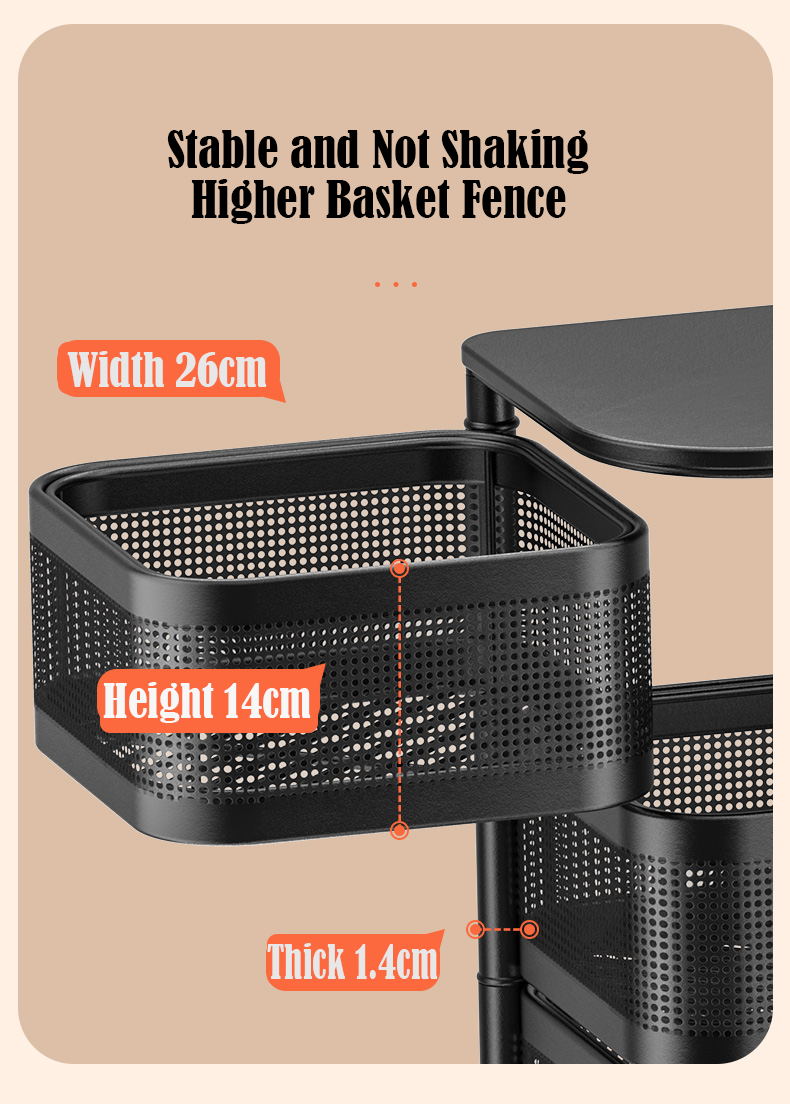
<style>
.page{position:relative;width:790px;height:1104px;background:#ddbfa7}
.page>*{position:absolute;margin:0}
.t1{font:48px "BernardMT-Condensed";color:#000000}
.t2{font:44px "BernardMT-Condensed";color:#e7e7e7}
.t3{font:44px "BernardMT-Condensed";color:#f7f7f7}
.t4{font:44px "BernardMT-Condensed";color:#e7e7e7;scale:0.85 1}
</style>
<div class="page">
<p class="t1" style="left:167px;top:129px;width:422px;height:45px">Stable and Not Shaking</p>
<p class="t1" style="left:191px;top:179px;width:375px;height:45px">Higher Basket Fence</p>
<p class="t2" style="left:67px;top:351px;width:200px;height:36px">Width 26cm</p>
<p class="t3" style="left:103px;top:682px;width:208px;height:41px">Height 14cm</p>
<p class="t4" style="left:267px;top:943px;width:171px;height:36px">Thick 1.4cm</p>
</div>
